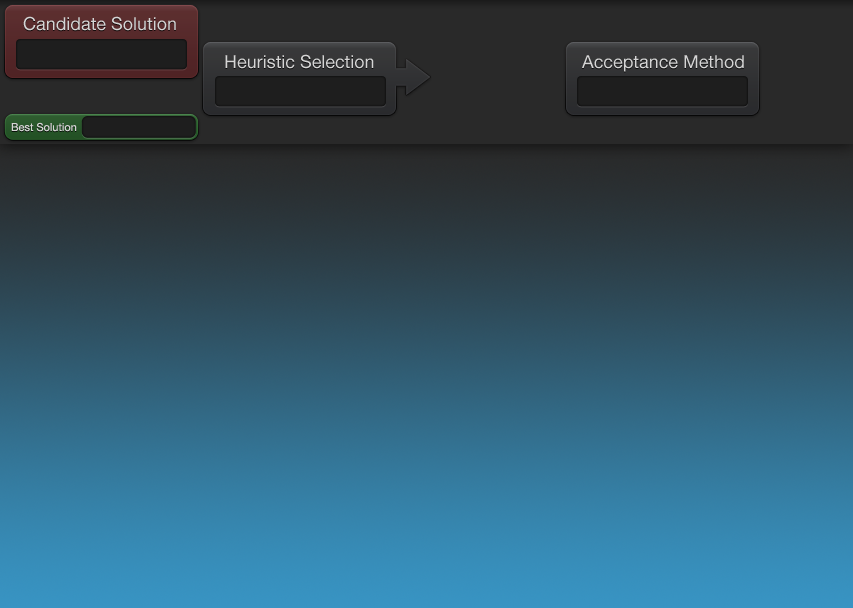
<style>
.page{position:relative;width:853px;height:608px}
.page>*{position:absolute;margin:0}
.t1{font:18px "HelveticaNeue";color:#d5d5d5}
.t2{font:11px "HelveticaNeue";color:#d5d5d5}
</style>
<div class="page">
<p class="t1" style="left:23px;top:16px;width:153px;height:15px">Candidate Solution</p>
<p class="t1" style="left:225px;top:54px;width:149px;height:15px">Heuristic Selection</p>
<p class="t1" style="left:582px;top:55px;width:162px;height:17px">Acceptance Method</p>
<p class="t2" style="left:11px;top:122px;width:66px;height:10px">Best Solution</p>
</div>
